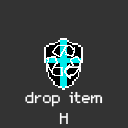
<style>
.page{position:relative;width:128px;height:128px;background:#333333}
.page>*{position:absolute;margin:0}
.t1{font:25px/20.8px "m5x7";color:#ffffff}
</style>
<div class="page">
<p class="t1" style="left:25px;top:91px;width:78px;height:34px;text-align:center">drop item<br>H</p>
</div>
